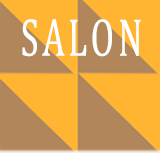
<style>
.page{position:relative;width:160px;height:153px;background:#ffb432}
.page>*{position:absolute;margin:0}
.t1{font:54px "Cambria";letter-spacing:0.1em;color:#ffffff;scale:0.67 1}
</style>
<div class="page">
<p class="t1" style="left:22px;top:19px;width:119px;height:38px">SALON</p>
</div>
